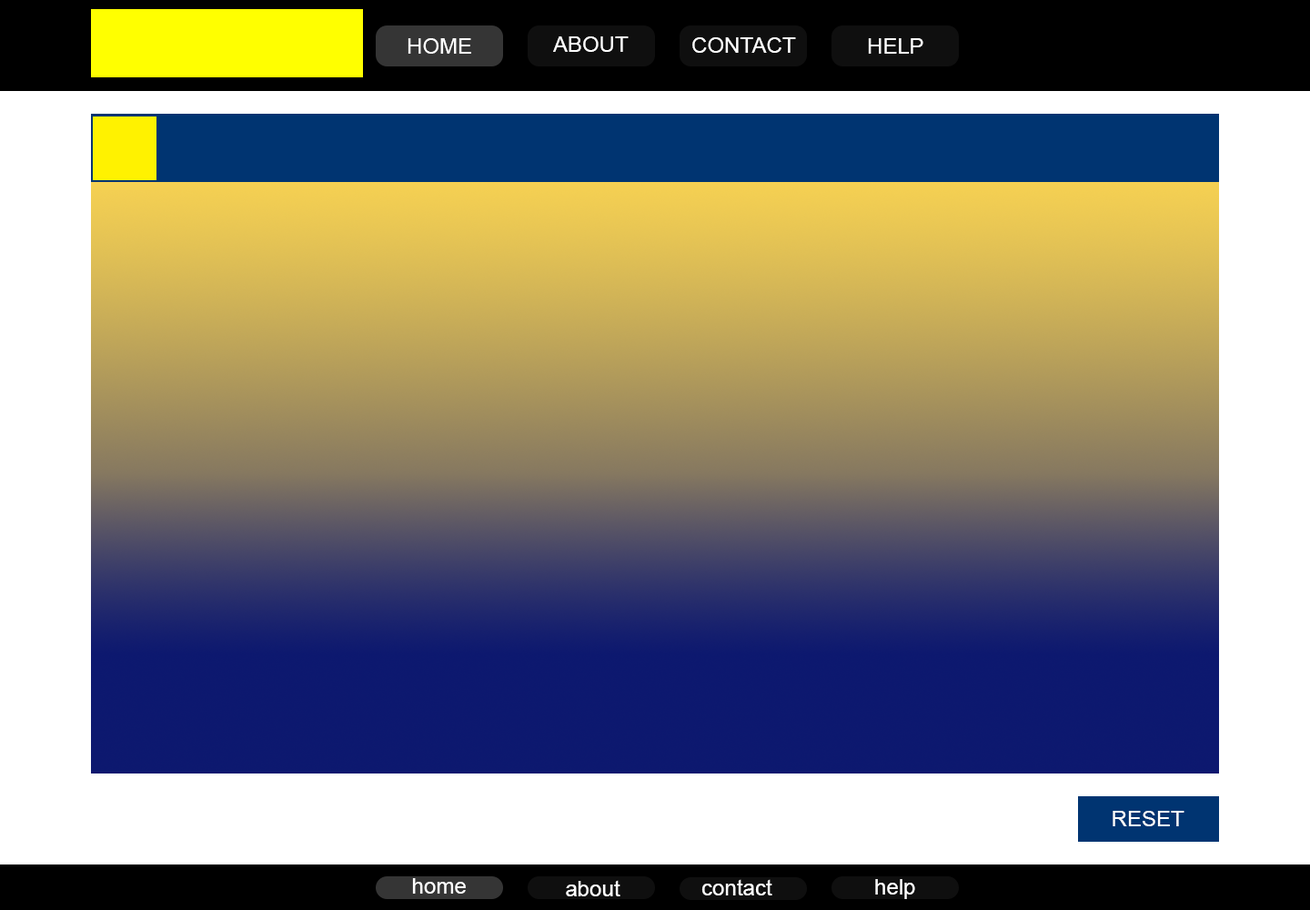
<style>
.page{position:relative;width:1310px;height:910px;background:#ffffff}
.page>*{position:absolute;margin:0}
.t1{font:21.8px "ArialMT";color:#ffffff}
</style>
<div class="page">
<p class="t1" style="left:408px;top:38px;width:63px;height:16px">HOME</p>
<p class="t1" style="left:553px;top:36px;width:76px;height:16px">ABOUT</p>
<p class="t1" style="left:693px;top:37px;width:103px;height:16px">CONTACT</p>
<p class="t1" style="left:868px;top:38px;width:56px;height:16px">HELP</p>
<p class="t1" style="left:1113px;top:811px;width:72px;height:15px">RESET</p>
<p class="t1" style="left:412px;top:878px;width:54px;height:16px">home</p>
<p class="t1" style="left:566px;top:880px;width:55px;height:16px">about</p>
<p class="t1" style="left:702px;top:879px;width:71px;height:16px">contact</p>
<p class="t1" style="left:875px;top:879px;width:40px;height:20px">help</p>
</div>
